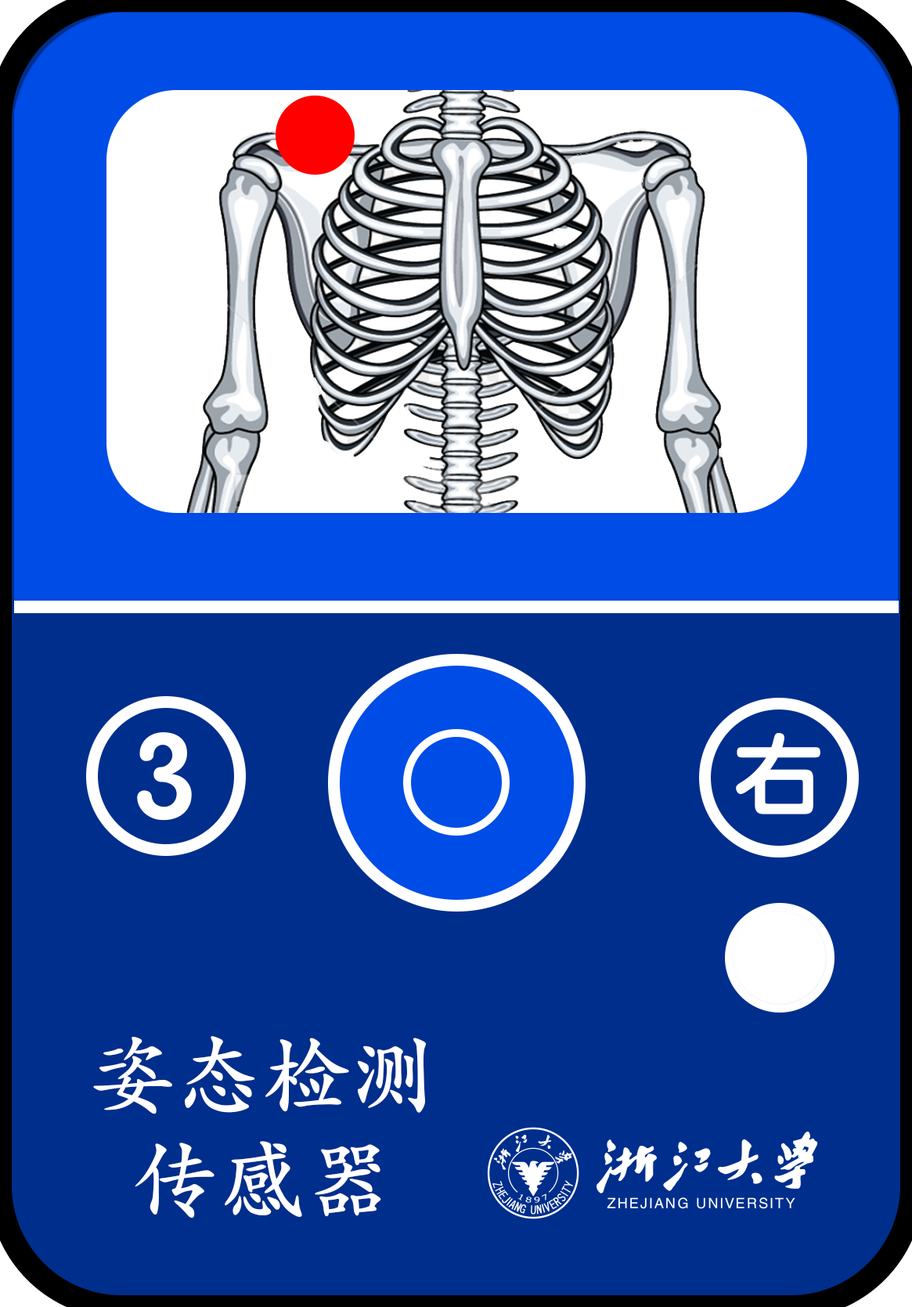
<style>
.page{position:relative;width:912px;height:1307px;background:#002e8c}
.page>*{position:absolute;margin:0}
.t1{font:121.8px "STYuanti-TC-Bold";letter-spacing:0.1em;color:#ffffff}
.t2{font:87px "STYuanti-TC-Bold";letter-spacing:0.1em;color:#ffffff}
.t3{font:87.6px "STKaitiTC-Bold";color:#ffffff}
</style>
<div class="page">
<p class="t1" style="left:137px;top:732px;width:55px;height:89px">3</p>
<p class="t2" style="left:736px;top:733px;width:85px;height:81px">右</p>
<p class="t3" style="left:93px;top:1036px;width:333px;height:182px;text-align:center">姿态检测<br>传感器</p>
</div>
